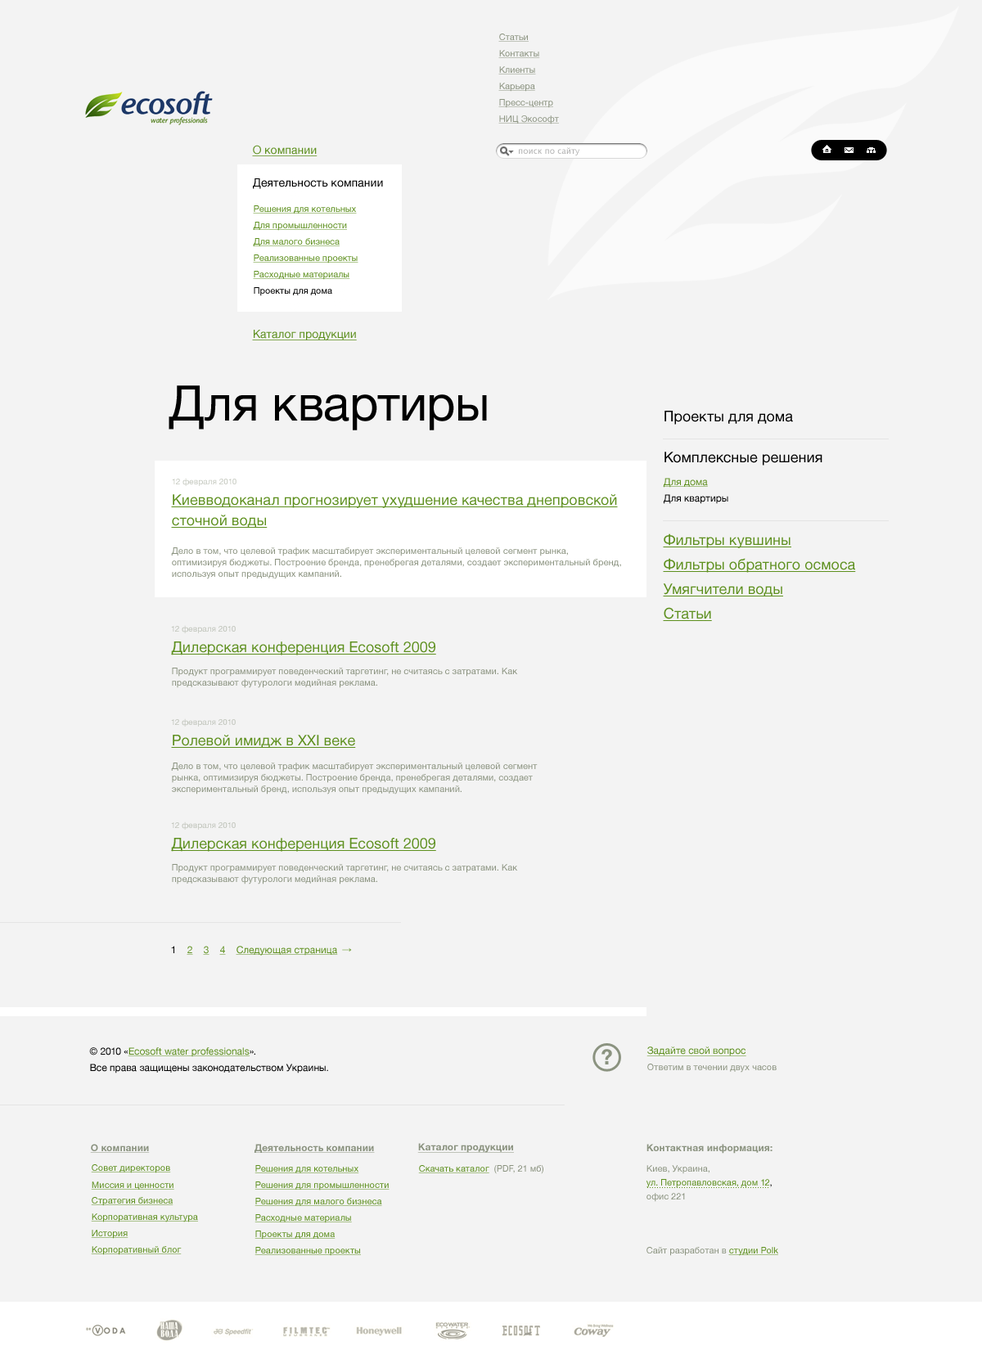
<style>
.page{position:relative;width:982px;height:1350px;background:#f3f3f3}
.page>*{position:absolute;margin:0}
.t1{font:9px "HelveticaNeue";color:#8b9380;text-decoration:underline}
.t2{font:11.5px "HelveticaNeue";color:#5e901f;text-decoration:underline}
.t3{font:8.2px "LucidaGrande";color:#b2b2b2}
.t4{font:11.5px "HelveticaNeue";color:#000000}
.t5{font:9px "HelveticaNeue";color:#5e901f;text-decoration:underline}
.t6{font:9px "HelveticaNeue";color:#000000}
.t7{font:49.1px "HelveticaNeue";color:#000000}
.t8{font:14.7px "HelveticaNeue";color:#000000}
.t9{font:8.2px "HelveticaNeue";color:#c5c9bf}
.t10{font:9.8px/16.4px "HelveticaNeue";color:#000000}
.t11{font:9.8px/16.4px "HelveticaNeue";color:#5e901f;text-decoration:underline}
.t12{font:14.7px/20.5px "HelveticaNeue";color:#5e901f;text-decoration:underline}
.t13{font:14.7px/24.5px "HelveticaNeue";color:#5e901f;text-decoration:underline}
.t14{font:9px/11.5px "HelveticaNeue";color:#8b9380}
.t15{font:8.2px "HelveticaNeue";color:#bfc3b9}
.t16{font:14.7px "HelveticaNeue";color:#5e901f;text-decoration:underline}
.t17{font:9.8px "HelveticaNeue";color:#000000}
.t18{font:9.8px "HelveticaNeue";color:#5e901f;text-decoration:underline}
.t19{font:9.8px "HelveticaNeue";text-decoration:underline}
.t20{font:9.8px "ArialMT"}
.t21{font:9px "HelveticaNeue";color:#8b9380}
.t22{font:9.8px "HelveticaNeue-Bold";color:#8b9380;text-decoration:underline}
.t23{font:9px/13.9px "HelveticaNeue";color:#5e901f}
.t24{font:9.8px/16.4px "HelveticaNeue-Bold";color:#8b9380}
.t25{font:9px/20.5px "HelveticaNeue";color:#8b9380}
.t26{font:9px/13.9px "HelveticaNeue";color:#000000}
.t27{font:9px/13.9px "HelveticaNeue";color:#8b9380}
</style>
<div class="page">
<p class="t1" style="left:498px;top:34px;width:31px;height:8px">Статьи</p>
<p class="t1" style="left:498px;top:50px;width:42px;height:8px">Контакты</p>
<p class="t1" style="left:498px;top:66px;width:38px;height:8px">Клиенты</p>
<p class="t1" style="left:498px;top:83px;width:37px;height:9px">Карьера</p>
<p class="t1" style="left:498px;top:99px;width:55px;height:9px">Пресс-центр</p>
<p class="t1" style="left:498px;top:115px;width:61px;height:9px">НИЦ Экософт</p>
<p class="t2" style="left:252px;top:145px;width:65px;height:11px">О компании</p>
<p class="t3" style="left:519px;top:147px;width:61px;height:8px">поиск по сайту</p>
<p class="t4" style="left:253px;top:178px;width:130px;height:11px">Деятельность компании</p>
<p class="t5" style="left:253px;top:205px;width:104px;height:9px">Решения для котельных</p>
<p class="t5" style="left:253px;top:222px;width:94px;height:9px">Для промышленности</p>
<p class="t5" style="left:253px;top:238px;width:87px;height:8px">Для малого бизнеса</p>
<p class="t5" style="left:253px;top:254px;width:105px;height:9px">Реализованные проекты</p>
<p class="t5" style="left:253px;top:271px;width:97px;height:9px">Расходные материалы</p>
<p class="t6" style="left:254px;top:287px;width:78px;height:9px">Проекты для дома</p>
<p class="t2" style="left:252px;top:330px;width:105px;height:10px">Каталог продукции</p>
<p class="t7" style="left:169px;top:385px;width:318px;height:45px">Для квартиры</p>
<p class="t8" style="left:664px;top:411px;width:129px;height:14px">Проекты для дома</p>
<p class="t8" style="left:664px;top:452px;width:158px;height:14px">Комплексные решения</p>
<p class="t9" style="left:172px;top:478px;width:64px;height:8px">12 февраля 2010</p>
<p class="t10" style="left:663px;top:478px;width:65px;height:26px"><span class="t11">Для дома<br></span>Для квартиры</p>
<p class="t12" style="left:171px;top:494px;width:447px;height:34px">Киевводоканал прогнозирует ухудшение качества днепровской<br>сточной воды</p>
<p class="t13" style="left:663px;top:533px;width:193px;height:88px">Фильтры кувшины<br>Фильтры обратного осмоса<br>Умягчители воды<br>Статьи</p>
<p class="t14" style="left:171px;top:547px;width:450px;height:32px">Дело в том, что целевой трафик масштабирует экспериментальный целевой сегмент рынка,<br>оптимизируя бюджеты. Построение бренда, пренебрегая деталями, создает экспериментальный бренд,<br>используя опыт предыдущих кампаний.</p>
<p class="t15" style="left:171px;top:625px;width:65px;height:8px">12 февраля 2010</p>
<p class="t16" style="left:171px;top:641px;width:265px;height:14px">Дилерская конференция Ecosoft 2009</p>
<p class="t14" style="left:172px;top:668px;width:346px;height:20px">Продукт программирует поведенческий таргетинг, не считаясь с затратами. Как предсказывают футурологи медийная реклама.</p>
<p class="t15" style="left:171px;top:718px;width:65px;height:9px">12 февраля 2010</p>
<p class="t16" style="left:171px;top:735px;width:185px;height:13px">Ролевой имидж в XXI веке</p>
<p class="t14" style="left:171px;top:763px;width:367px;height:31px">Дело в том, что целевой трафик масштабирует экспериментальный целевой сегмент рынка, оптимизируя бюджеты. Построение бренда, пренебрегая деталями, создает экспериментальный бренд, используя опыт предыдущих кампаний.</p>
<p class="t15" style="left:171px;top:821px;width:65px;height:9px">12 февраля 2010</p>
<p class="t16" style="left:171px;top:838px;width:265px;height:14px">Дилерская конференция Ecosoft 2009</p>
<p class="t14" style="left:172px;top:864px;width:346px;height:20px">Продукт программирует поведенческий таргетинг, не считаясь с затратами. Как предсказывают футурологи медийная реклама.</p>
<p class="t17" style="left:171px;top:946px;width:3px;height:7px">1</p>
<p class="t18" style="left:187px;top:946px;width:6px;height:9px">2</p>
<p class="t19" style="left:203px;top:946px;width:6px;height:9px">3</p>
<p class="t18" style="left:219px;top:946px;width:7px;height:9px">4</p>
<p class="t18" style="left:236px;top:946px;width:102px;height:10px">Следующая страница</p>
<p class="t20" style="left:342px;top:947px;width:10px;height:5px">→</p>
<p class="t10" style="left:89px;top:1047px;width:239px;height:26px">© 2010 «<span class="t11">Ecosoft water professionals</span>».<br>Все права защищены законодательством Украины.</p>
<p class="t18" style="left:646px;top:1046px;width:100px;height:10px">Задайте свой вопрос</p>
<p class="t21" style="left:647px;top:1064px;width:129px;height:9px">Ответим в течении двух часов</p>
<p class="t22" style="left:90px;top:1144px;width:60px;height:9px">О компании</p>
<p class="t22" style="left:254px;top:1144px;width:121px;height:9px">Деятельность компании</p>
<p class="t22" style="left:417px;top:1143px;width:97px;height:10px">Каталог продукции</p>
<p class="t23" style="left:646px;top:1144px;width:126px;height:58px"><span class="t24">Контактная информация:<br></span><span class="t25">Киев, Украина,<br></span>ул. Петропавловская, дом 12<span class="t26">,<br></span><span class="t27">офис 221</span></p>
<p class="t5" style="left:91px;top:1164px;width:80px;height:9px">Совет директоров</p>
<p class="t5" style="left:254px;top:1165px;width:105px;height:8px">Решения для котельных</p>
<p class="t5" style="left:418px;top:1165px;width:71px;height:8px">Скачать каталог</p>
<p class="t21" style="left:494px;top:1165px;width:49px;height:9px">(PDF, 21 мб)</p>
<p class="t5" style="left:91px;top:1181px;width:83px;height:9px">Миссия и ценности</p>
<p class="t5" style="left:254px;top:1181px;width:135px;height:9px">Решения для промышленности</p>
<p class="t5" style="left:91px;top:1197px;width:82px;height:9px">Стратегия бизнеса</p>
<p class="t5" style="left:254px;top:1198px;width:128px;height:8px">Решения для малого бизнеса</p>
<p class="t5" style="left:91px;top:1213px;width:107px;height:9px">Корпоративная культура</p>
<p class="t5" style="left:254px;top:1214px;width:98px;height:9px">Расходные материалы</p>
<p class="t5" style="left:91px;top:1230px;width:37px;height:9px">История</p>
<p class="t5" style="left:254px;top:1231px;width:81px;height:9px">Проекты для дома</p>
<p class="t5" style="left:91px;top:1246px;width:91px;height:9px">Корпоративный блог</p>
<p class="t5" style="left:254px;top:1247px;width:107px;height:9px">Реализованные проекты</p>
<p class="t21" style="left:646px;top:1247px;width:132px;height:9px">Сайт разработан в <span class="t5">студии Polk</span></p>
</div>
